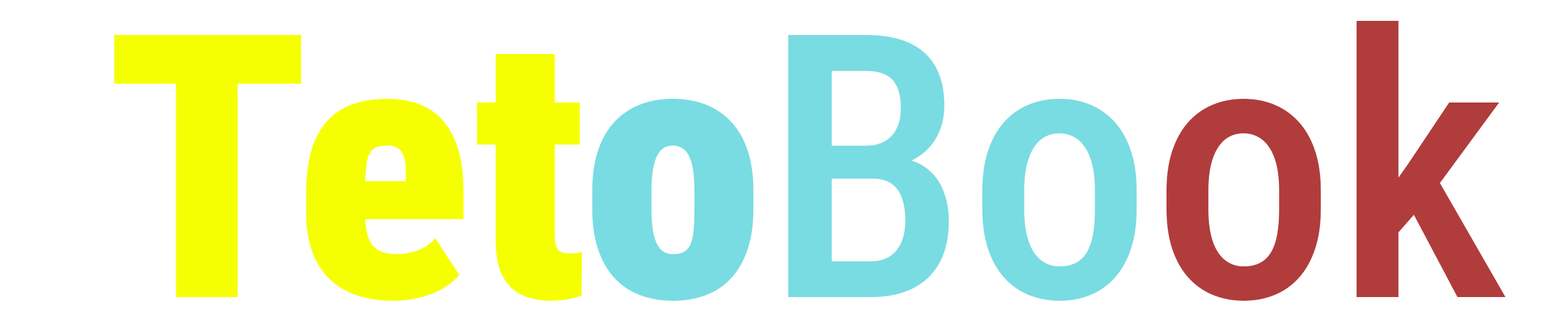
<style>
.page{position:relative;width:1568px;height:321px;background:#ffffff}
.page>*{position:absolute;margin:0}
.t1{font:368.4px "Roboto-CondensedBlack";color:#f6ff01}
.t2{font:368.4px "Roboto-CondensedBlack";color:#79dce2}
.t3{font:368.4px "Roboto-CondensedMedium";color:#79dce2}
.t4{font:368.4px "Roboto-CondensedMedium";color:#b13c3c}
</style>
<div class="page">
<p class="t1" style="left:114px;top:21px;width:1392px;height:280px">Tet<span class="t2">o</span><span class="t3">Bo</span><span class="t4">ok</span></p>
</div>
